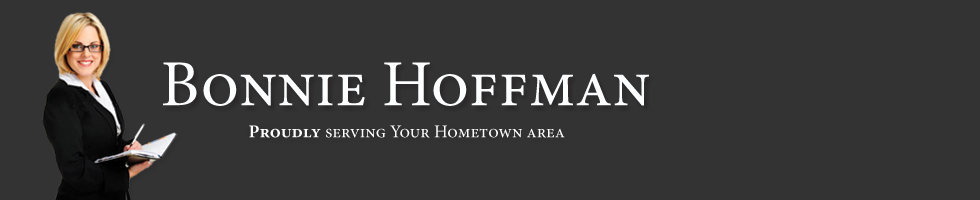
<style>
.page{position:relative;width:980px;height:200px;background:#333333}
.page>*{position:absolute;margin:0}
.t1{font:65.7px "MinionPro-Regular";color:#fdfeff;font-variant:small-caps}
.t2{font:18px "MinionPro-Regular";color:#ffffff;font-variant:small-caps}
.t3{font:18px "MinionPro-Bold";color:#ffffff;font-variant:small-caps}
</style>
<div class="page">
<p class="t1" style="left:163px;top:62px;width:486px;height:44px">Bonnie Hoffman</p>
<p class="t2" style="left:249px;top:125px;width:316px;height:13px"><span class="t3">Proudly</span> serving Your Hometown area</p>
</div>
